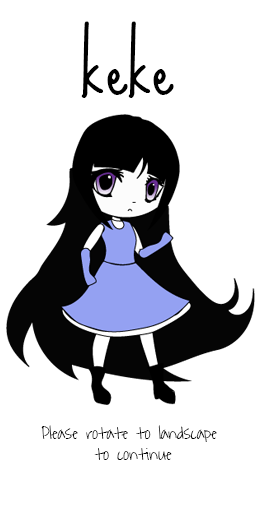
<style>
.page{position:relative;width:256px;height:512px;background:#ffffff}
.page>*{position:absolute;margin:0}
.t1{font:72px "SueEllenFrancisco";color:#000000}
.t2{font:18px "WaitingfortheSunrise";color:#010101}
</style>
<div class="page">
<p class="t1" style="left:81px;top:21px;width:93px;height:77px">keke</p>
<p class="t2" style="left:41px;top:425px;width:176px;height:35px;text-align:center">Please rotate to landscape <br>to continue</p>
</div>
